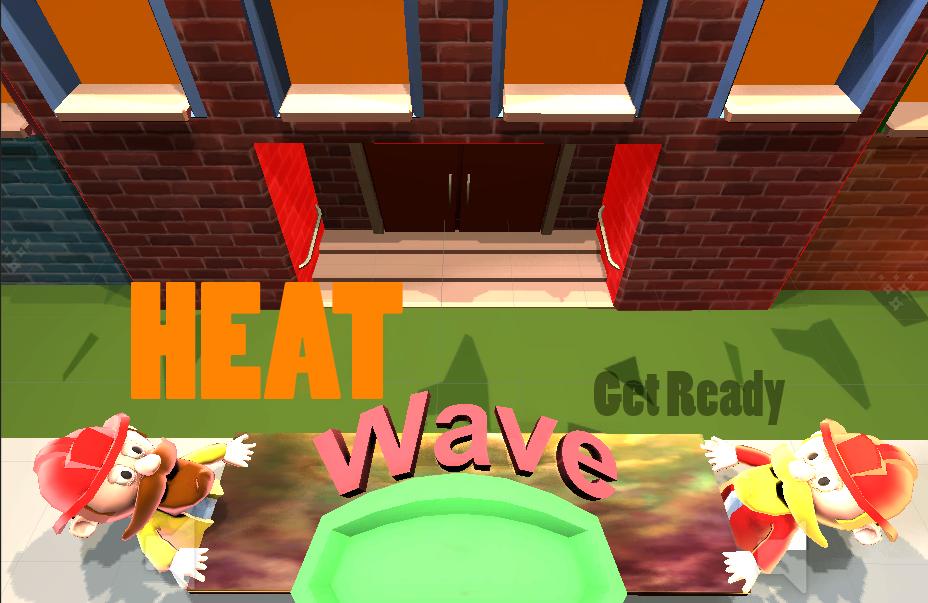
<style>
.page{position:relative;width:928px;height:603px}
.page>*{position:absolute;margin:0}
.t1{font:156.4px "PoplarStd";color:#ff8401}
.t2{font:60px "PoplarStd";color:#425519}
</style>
<div class="page">
<p class="t1" style="left:131px;top:281px;width:272px;height:119px">HEAT</p>
<p class="t2" style="left:594px;top:370px;width:192px;height:55px">Get Ready</p>
</div>
